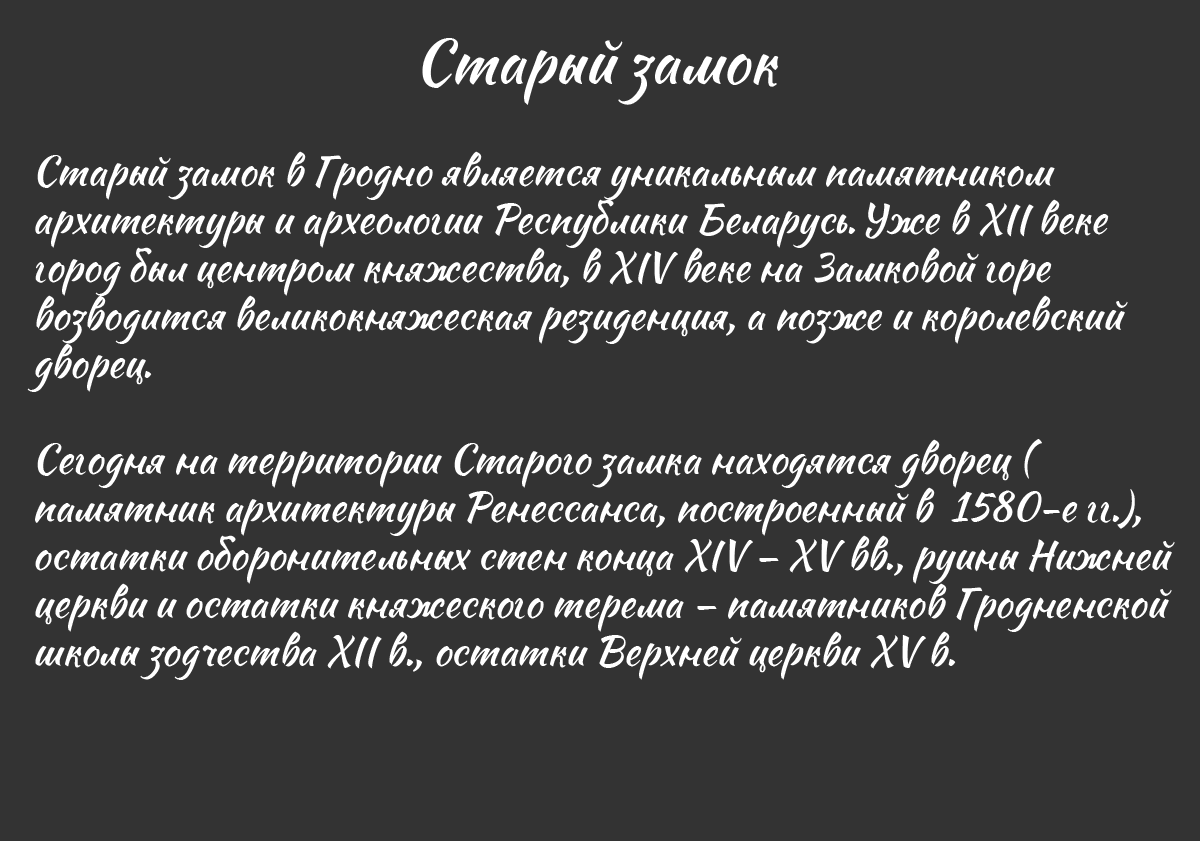
<style>
.page{position:relative;width:1200px;height:841px;background:#333333}
.page>*{position:absolute;margin:0}
.t1{font:60px "Sweet-Mavka-Script";color:#ffffff}
.t2{font:40px "Sweet-Mavka-Script";color:#ffffff}
</style>
<div class="page">
<p class="t1" style="left:422px;top:38px;width:357px;height:67px">Старый замок</p>
<p class="t2" style="left:27px;top:151px;width:1148px;height:529px">Старый замок в Гродно является уникальным памятником <br>архитектуры и археологии Республики Беларусь. Уже в XII веке <br>город был центром княжества, в XIV веке на Замковой горе <br>возводится великокняжеская резиденция, а позже и королевский <br>дворец. <br><br>Сегодня на территории Старого замка находятся дворец (<br>памятник архитектуры Ренессанса, построенный в  1580-е гг.), <br>остатки оборонительных стен конца XIV – XV вв., руины Нижней <br>церкви и остатки княжеского терема – памятников Гродненской <br>школы зодчества XII в., остатки Верхней церкви XV в.</p>
</div>
